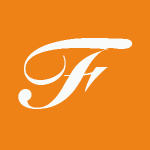
<style>
.page{position:relative;width:150px;height:150px;background:#ef8217}
.page>*{position:absolute;margin:0}
.t1{font:97.2px "SnellRoundhand-Black";color:#f9fbfb}
</style>
<div class="page">
<p class="t1" style="left:18px;top:38px;width:115px;height:71px">F</p>
</div>
